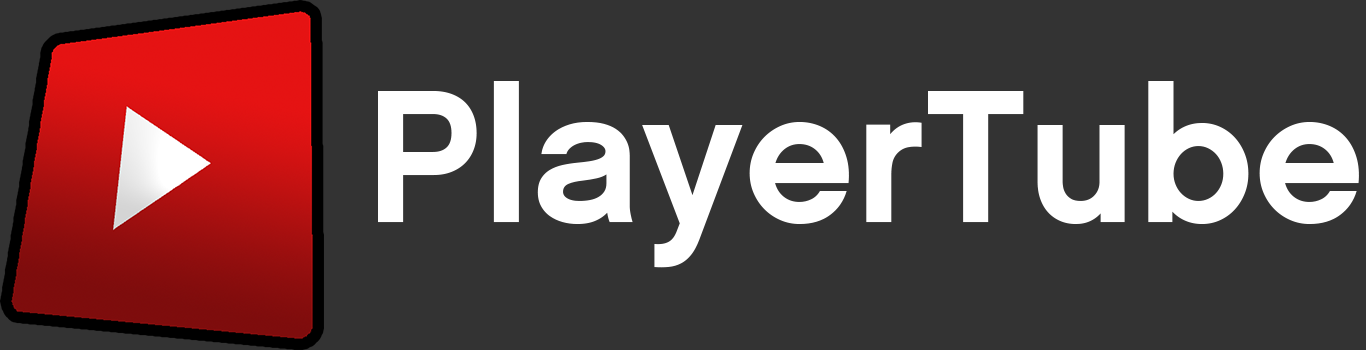
<style>
.page{position:relative;width:1366px;height:350px;background:#333333}
.page>*{position:absolute;margin:0}
.t1{font:188.7px "Chalet-NewYorkNineteenSixty";letter-spacing:0.005em;color:#ffffff}
</style>
<div class="page">
<p class="t1" style="left:378px;top:81px;width:981px;height:187px">PlayerTube</p>
</div>
